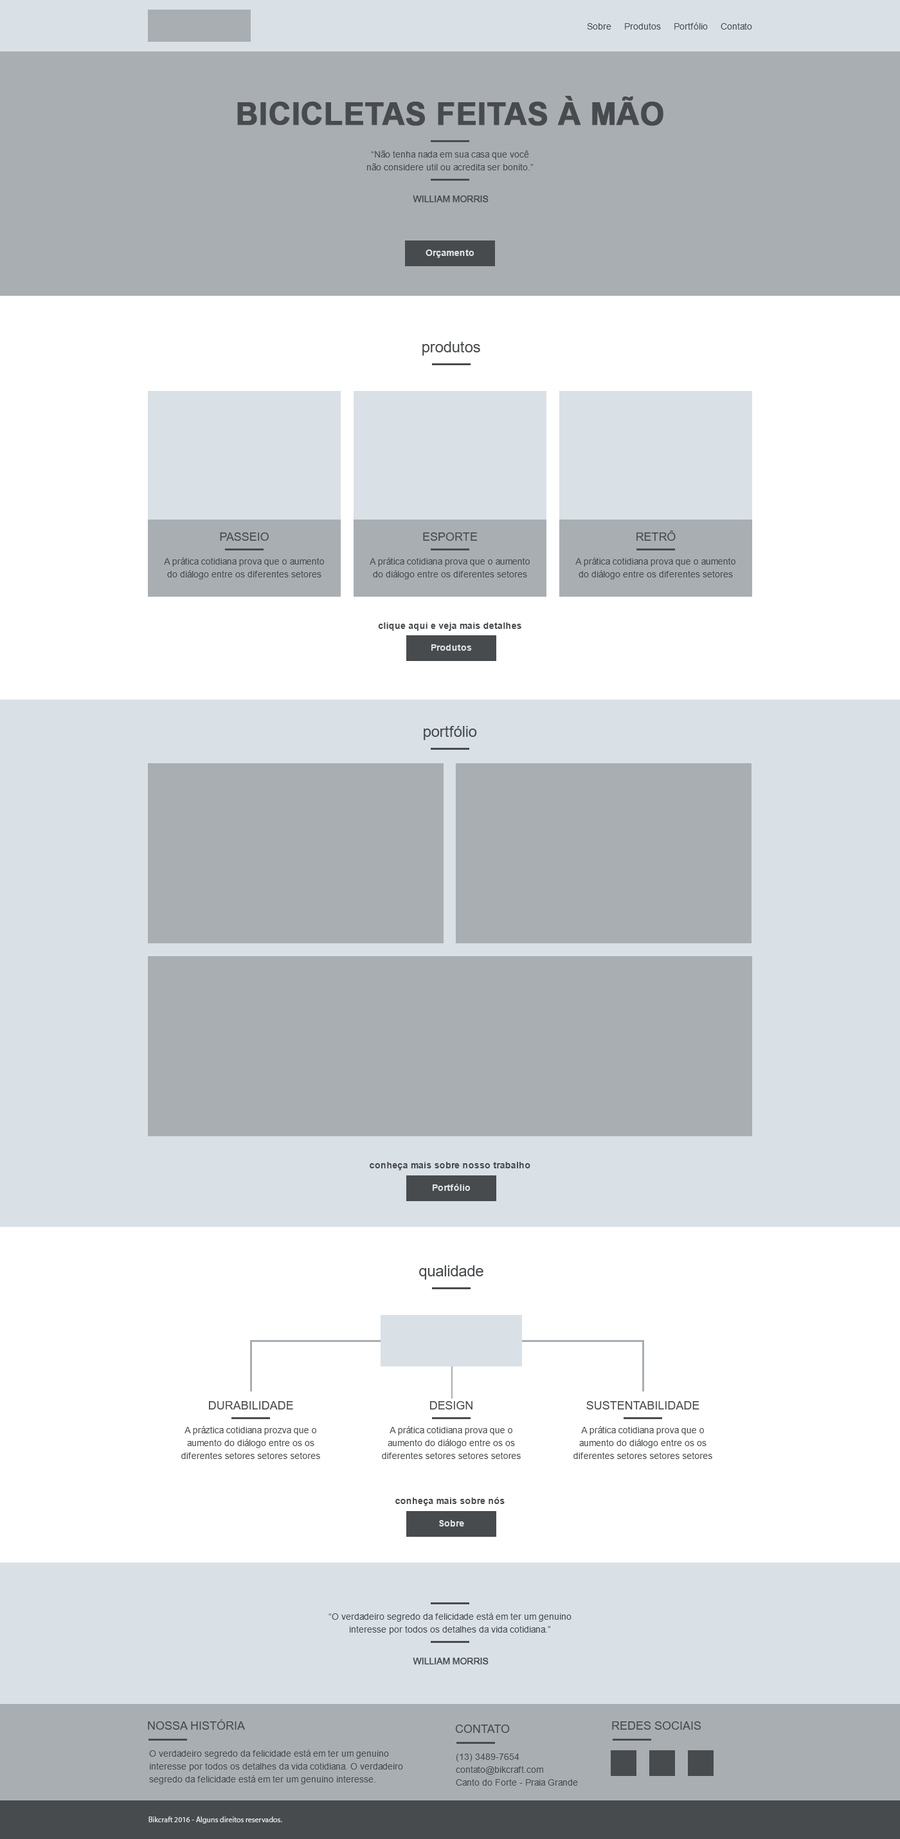
<style>
.page{position:relative;width:900px;height:1839px;background:#a9aeb3}
.page>*{position:absolute;margin:0}
.t1{font:9px "ArialMT";color:#484b4d}
.t2{font:30.9px "Arial-BoldMT";color:#484b4d;text-transform:uppercase;font-weight:bold}
.t3{font:9px/12.9px "ArialMT";color:#484b4d}
.t4{font:9px "ArialMT";color:#484b4d;text-transform:uppercase;font-weight:bold}
.t5{font:9px "Arial-BoldMT";letter-spacing:0.01em;color:#d9e0e6}
.t6{font:15.4px "ArialMT";color:#484b4d}
.t7{font:11.6px "ArialMT";color:#484b4d}
.t8{font:9px "Arial-BoldMT";letter-spacing:0.01em;color:#484b4d}
.t9{font:11.6px "ArialMT";color:#484b4d;text-transform:uppercase}
.t10{font:7.7px "MyriadPro-Regular";color:#d9e0e6}
</style>
<div class="page">
<p class="t1" style="left:587px;top:22px;width:165px;height:8px">Sobre     Produtos     Portfólio     Contato</p>
<p class="t2" style="left:237px;top:96px;width:426px;height:30px">Bicicletas Feitas à Mão</p>
<p class="t3" style="left:367px;top:150px;width:166px;height:20px;text-align:center">“Não tenha nada em sua casa que você<br>não considere util ou acredita ser bonito.”</p>
<p class="t4" style="left:413px;top:195px;width:76px;height:8px">william morris</p>
<p class="t5" style="left:426px;top:249px;width:48px;height:9px">Orçamento</p>
<p class="t6" style="left:422px;top:341px;width:58px;height:15px">produtos</p>
<p class="t7" style="left:220px;top:532px;width:49px;height:9px">PASSEIO</p>
<p class="t7" style="left:423px;top:532px;width:54px;height:9px">ESPORTE</p>
<p class="t7" style="left:636px;top:530px;width:40px;height:11px">RETRÔ</p>
<p class="t3" style="left:164px;top:557px;width:160px;height:22px;text-align:center">A prática cotidiana prova que o aumento do diálogo entre os diferentes setores</p>
<p class="t3" style="left:370px;top:557px;width:160px;height:22px;text-align:center">A prática cotidiana prova que o aumento do diálogo entre os diferentes setores</p>
<p class="t3" style="left:575px;top:557px;width:160px;height:22px;text-align:center">A prática cotidiana prova que o aumento do diálogo entre os diferentes setores</p>
<p class="t8" style="left:378px;top:622px;width:143px;height:9px">clique aqui e veja mais detalhes</p>
<p class="t5" style="left:431px;top:644px;width:41px;height:7px">Produtos</p>
<p class="t6" style="left:424px;top:726px;width:53px;height:14px">portfólio</p>
<p class="t8" style="left:370px;top:1162px;width:160px;height:8px">conheça mais sobre nosso trabalho</p>
<p class="t5" style="left:433px;top:1184px;width:37px;height:7px">Portfólio</p>
<p class="t6" style="left:419px;top:1265px;width:64px;height:14px">qualidade</p>
<p class="t7" style="left:209px;top:1401px;width:84px;height:8px">DURABILIDADE</p>
<p class="t7" style="left:430px;top:1401px;width:43px;height:8px">DESIGN</p>
<p class="t7" style="left:586px;top:1401px;width:113px;height:8px">SUSTENTABILIDADE</p>
<p class="t3" style="left:181px;top:1426px;width:139px;height:33px;text-align:center">A práztica cotidiana prozva que o aumento do diálogo entre os os diferentes setores setores setores</p>
<p class="t3" style="left:382px;top:1426px;width:139px;height:33px;text-align:center">A prática cotidiana prova que o aumento do diálogo entre os os diferentes setores setores setores</p>
<p class="t3" style="left:573px;top:1426px;width:139px;height:33px;text-align:center">A prática cotidiana prova que o aumento do diálogo entre os os diferentes setores setores setores</p>
<p class="t8" style="left:395px;top:1497px;width:110px;height:9px">conheça mais sobre nós</p>
<p class="t5" style="left:439px;top:1520px;width:25px;height:6px">Sobre</p>
<p class="t3" style="left:328px;top:1612px;width:244px;height:22px;text-align:center">“O verdadeiro segredo da felicidade está em ter um genuino<br>interesse por todos os detalhes da vida cotidiana.”</p>
<p class="t4" style="left:413px;top:1657px;width:76px;height:7px">william morris</p>
<p class="t9" style="left:148px;top:1719px;width:97px;height:10px">Nossa História</p>
<p class="t9" style="left:612px;top:1721px;width:89px;height:8px">redes sociais</p>
<p class="t9" style="left:455px;top:1724px;width:55px;height:9px">Contato</p>
<p class="t3" style="left:149px;top:1749px;width:254px;height:35px">O verdadeiro segredo da felicidade está em ter um genuino<br>interesse por todos os detalhes da vida cotidiana. O verdadeiro segredo da felicidade está em ter um genuino interesse.</p>
<p class="t3" style="left:456px;top:1753px;width:122px;height:32px">(13) 3489-7654<br>contato@bikcraft.com<br>Canto do Forte - Praia Grande</p>
<p class="t10" style="left:148px;top:1816px;width:134px;height:7px">Bikcraft 2016 - Alguns direitos reservados.</p>
</div>
